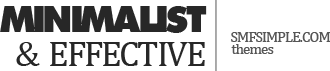
<style>
.page{position:relative;width:330px;height:71px;background:#ffffff}
.page>*{position:absolute;margin:0}
.t1{font:36px "Raiders";letter-spacing:-0.06em;color:#272727}
.t2{font:15px "Cambria";letter-spacing:-0.06em;color:#565656}
.t3{font:36px "Cambria";letter-spacing:-0.06em;color:#272727}
</style>
<div class="page">
<p class="t1" style="left:0px;top:6px;width:207px;height:27px">MINIMALIST</p>
<p class="t2" style="left:231px;top:32px;width:99px;height:10px">SMFSIMPLE.COM</p>
<p class="t3" style="left:16px;top:42px;width:24px;height:24px">&amp;</p>
<p class="t3" style="left:50px;top:42px;width:155px;height:24px">EFFECTIVE</p>
<p class="t2" style="left:231px;top:44px;width:43px;height:10px">themes</p>
</div>
